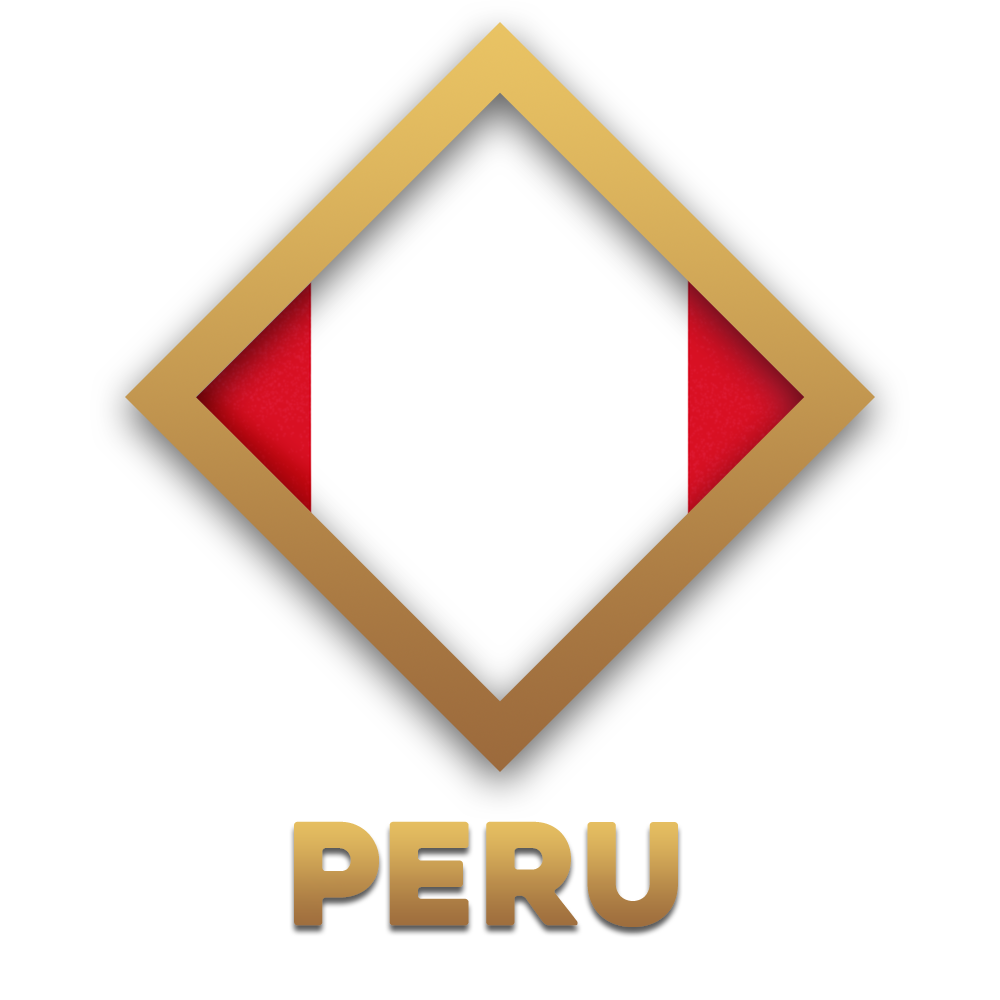
<style>
.page{position:relative;width:1000px;height:1000px;background:#ffffff}
.page>*{position:absolute;margin:0}
.t1{font:141px "Heavitas"}
</style>
<div class="page">
<p class="t1" style="left:294px;top:821px;width:384px;height:106px">peru</p>
</div>
